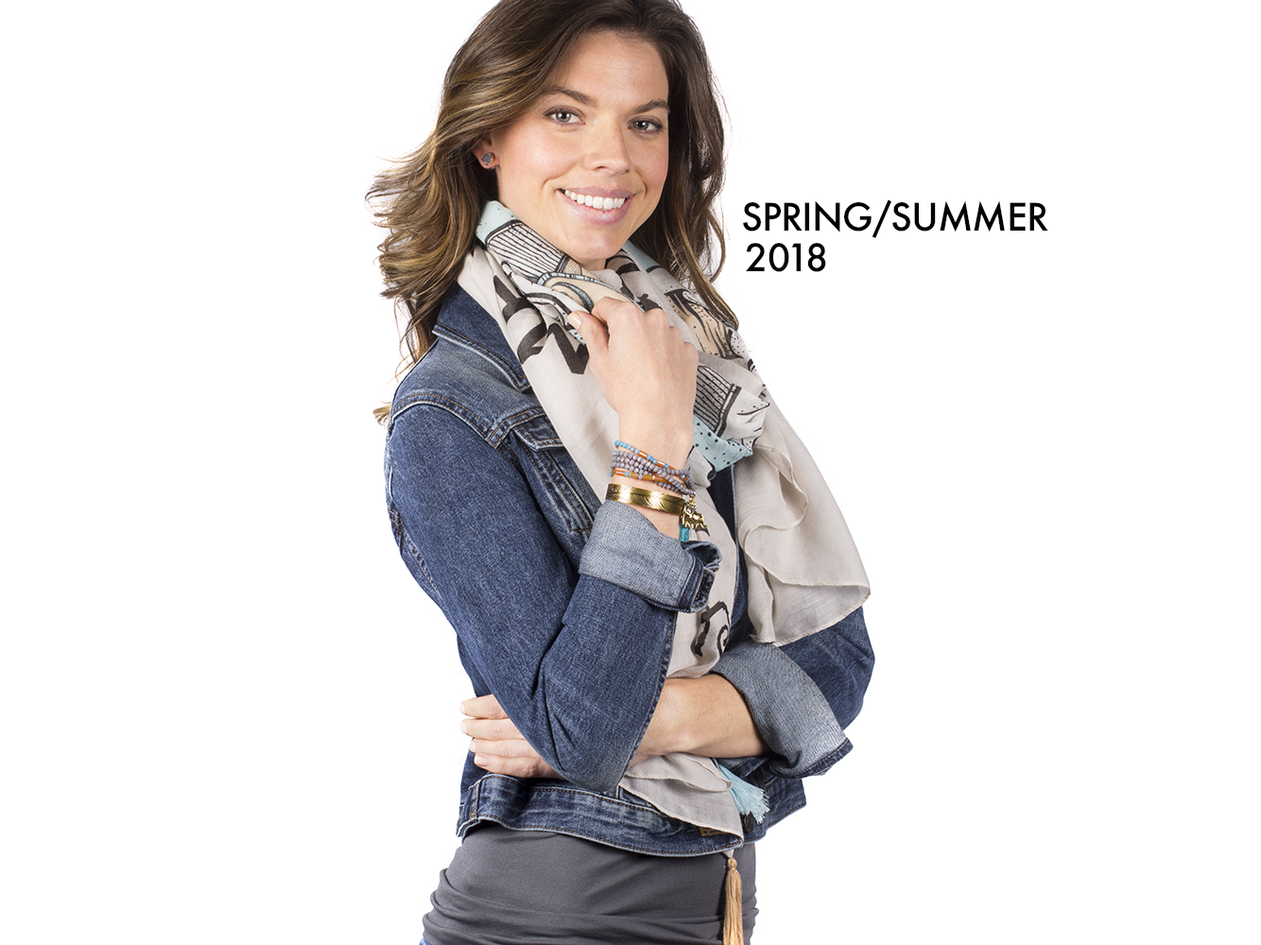
<style>
.page{position:relative;width:1261px;height:945px;background:#ffffff}
.page>*{position:absolute;margin:0}
.t1{font:36.9px "Futura-Medium";letter-spacing:-0.025em;color:#000000}
</style>
<div class="page">
<p class="t1" style="left:743px;top:199px;width:306px;height:39px">SPRING/SUMMER</p>
<p class="t1" style="left:746px;top:243px;width:80px;height:29px">2018</p>
</div>
